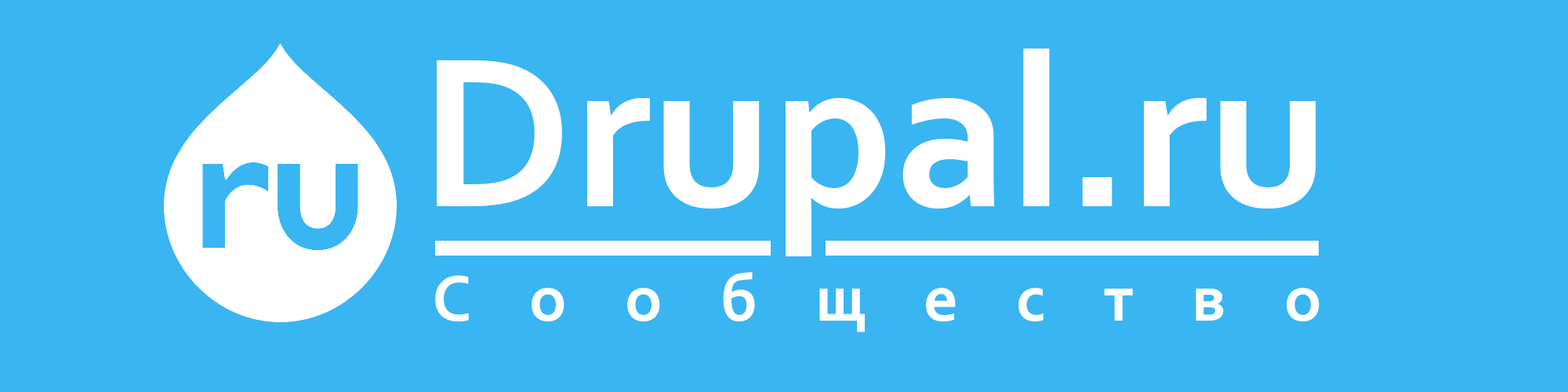
<style>
.page{position:relative;width:1568px;height:392px;background:#39b5f2}
.page>*{position:absolute;margin:0}
.t1{font:222.6px "Corbel-Bold";color:#ffffff}
.t2{font:67.6px "Corbel-Bold";letter-spacing:0.86em;color:#ffffff}
</style>
<div class="page">
<p class="t1" style="left:437px;top:48px;width:879px;height:208px">Drupal.ru</p>
<p class="t2" style="left:435px;top:272px;width:884px;height:60px">Сообщество</p>
</div>
